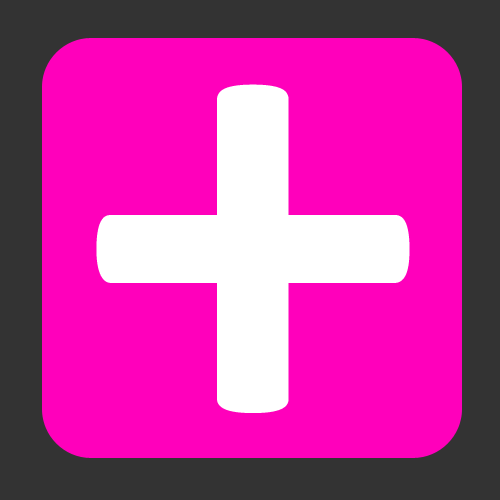
<style>
.page{position:relative;width:500px;height:500px;background:#ff00bb}
.page>*{position:absolute;margin:0}
.t1{font:1200px "Calibri-Bold";color:#ffffff}
</style>
<div class="page">
<p class="t1" style="left:96px;top:84px;width:314px;height:329px">+</p>
</div>
